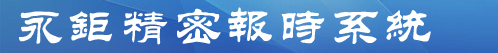
<style>
.page{position:relative;width:498px;height:53px}
.page>*{position:absolute;margin:0}
.t1{font:48px "FZL2FW--GB1-0";letter-spacing:0.1em;color:#ffffff}
</style>
<div class="page">
<p class="t1" style="left:19px;top:7px;width:412px;height:38px">永钜精密报时系统</p>
</div>
